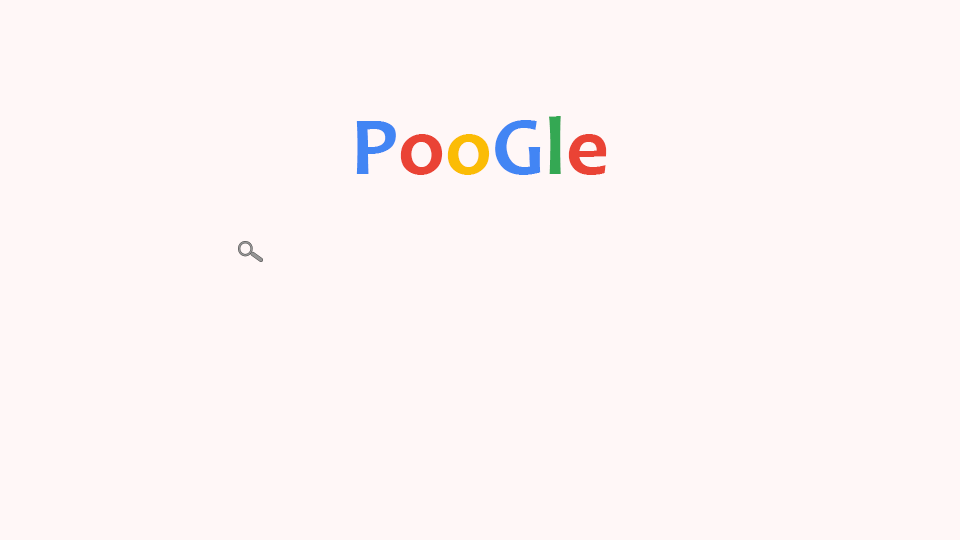
<style>
.page{position:relative;width:960px;height:540px;background:#fff7f7}
.page>*{position:absolute;margin:0}
.t1{font:84px "Candara-Bold";color:#4285f4}
.t2{font:84px "Candara-Bold";color:#ea4335}
.t3{font:84px "Candara-Bold";color:#fbbc05}
.t4{font:84px "Candara-Bold";color:#34a853}
</style>
<div class="page">
<p class="t1" style="left:356px;top:116px;width:251px;height:59px">P<span class="t2">o</span><span class="t3">o</span>G<span class="t4">l</span><span class="t2">e</span></p>
</div>
